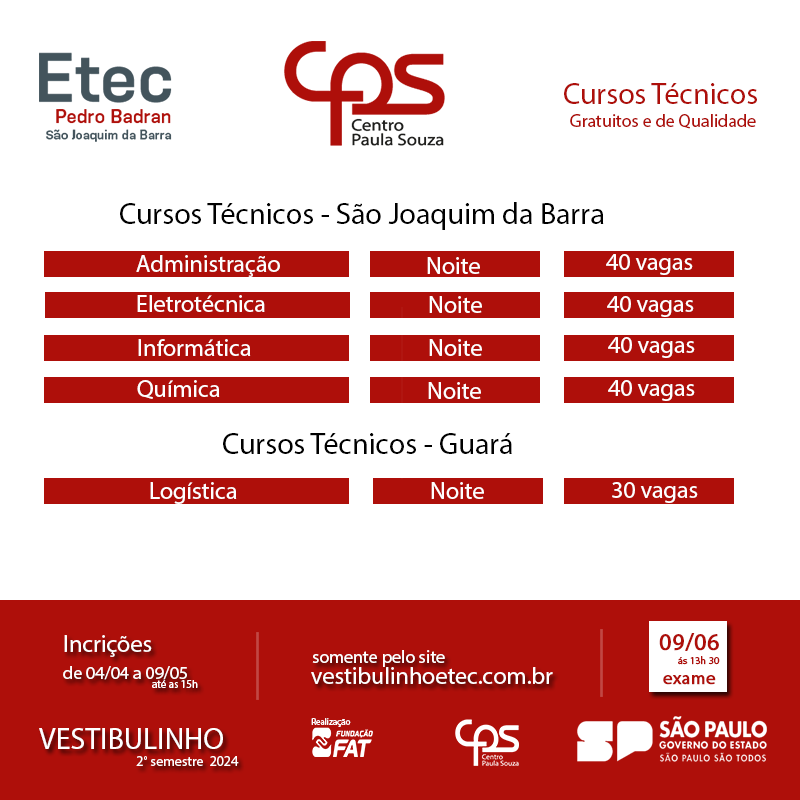
<style>
.page{position:relative;width:800px;height:800px;background:#ffffff}
.page>*{position:absolute;margin:0}
.t1{font:30px "MyriadPro-Regular";color:#ae0f0a}
.t2{font:18px "MyriadPro-Regular";color:#ae0f0a}
.t3{font:30px "MyriadPro-Regular";color:#000000}
.t4{font:24px "MyriadPro-Regular";color:#fdfdfd}
.t5{font:24px "MyriadPro-Regular";color:#ffffff}
.t6{font:24px "MyriadPro-Regular";color:#fffefe}
.t7{font:24px "MyriadPro-Regular";color:#ae0f0a;font-weight:bold}
.t8{font:18px "MyriadPro-Regular";color:#fffefe}
.t9{font:10px "MyriadPro-Regular";color:#ae0f0a;font-weight:bold}
.t10{font:18px "MyriadPro-Regular";color:#fdfdfd}
.t11{font:18px "MyriadPro-Regular";color:#ae0f0a;font-weight:bold}
.t12{font:11px "MyriadPro-Regular";color:#ffffff}
.t13{font:9px "MyriadPro-Regular";color:#ffffff}
.t14{font:30px "MyriadPro-Regular";color:#ffffff}
.t15{font:14px "MyriadPro-Regular";color:#ffffff}
</style>
<div class="page">
<p class="t1" style="left:564px;top:83px;width:193px;height:21px">Cursos Técnicos</p>
<p class="t2" style="left:570px;top:114px;width:186px;height:15px">Gratuitos e de Qualidade</p>
<p class="t3" style="left:120px;top:202px;width:484px;height:28px">Cursos Técnicos - São Joaquim da Barra</p>
<p class="t4" style="left:136px;top:255px;width:144px;height:22px">Administração</p>
<p class="t5" style="left:427px;top:257px;width:53px;height:17px">Noite</p>
<p class="t5" style="left:606px;top:254px;width:87px;height:21px">40 vagas</p>
<p class="t5" style="left:137px;top:295px;width:128px;height:17px">Eletrotécnica</p>
<p class="t5" style="left:429px;top:296px;width:53px;height:17px">Noite</p>
<p class="t6" style="left:607px;top:296px;width:87px;height:21px">40 vagas</p>
<p class="t5" style="left:138px;top:339px;width:113px;height:17px">Informática</p>
<p class="t5" style="left:429px;top:339px;width:53px;height:17px">Noite</p>
<p class="t5" style="left:608px;top:337px;width:87px;height:21px">40 vagas</p>
<p class="t5" style="left:137px;top:380px;width:83px;height:19px">Química</p>
<p class="t5" style="left:428px;top:382px;width:53px;height:17px">Noite</p>
<p class="t5" style="left:608px;top:380px;width:87px;height:21px">40 vagas</p>
<p class="t3" style="left:223px;top:433px;width:289px;height:21px">Cursos Técnicos - Guará</p>
<p class="t5" style="left:150px;top:482px;width:87px;height:22px">Logística</p>
<p class="t5" style="left:431px;top:482px;width:53px;height:17px">Noite</p>
<p class="t5" style="left:612px;top:482px;width:86px;height:21px">30 vagas</p>
<p class="t5" style="left:64px;top:635px;width:88px;height:22px">Incrições</p>
<p class="t7" style="left:659px;top:633px;width:60px;height:18px">09/06</p>
<p class="t8" style="left:312px;top:650px;width:133px;height:17px">somente pelo site</p>
<p class="t9" style="left:678px;top:656px;width:42px;height:9px">ás 13h 30</p>
<p class="t10" style="left:63px;top:666px;width:124px;height:14px">de 04/04 a 09/05</p>
<p class="t5" style="left:311px;top:667px;width:242px;height:17px">vestibulinhoetec.com.br</p>
<p class="t11" style="left:663px;top:675px;width:53px;height:10px">exame</p>
<p class="t12" style="left:152px;top:680px;width:46px;height:8px">até as 15h</p>
<p class="t13" style="left:311px;top:718px;width:40px;height:9px">Realização</p>
<p class="t14" style="left:39px;top:728px;width:184px;height:21px">VESTIBULINHO</p>
<p class="t15" style="left:136px;top:756px;width:103px;height:10px">2° semestre  2024</p>
</div>
